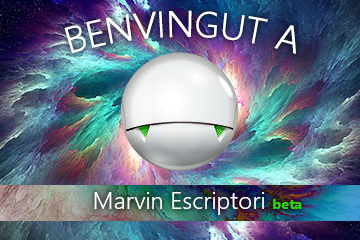
<style>
.page{position:relative;width:360px;height:240px}
.page>*{position:absolute;margin:0}
.t1{font:36px "SegoeUI-Semilight";color:#ffffff}
.t2{font:24px "SegoeUI-Semilight";color:#ffffff}
.t3{font:14px "SegoeUI-Bold";color:#2cd410}
</style>
<div class="page">
<p class="t1" style="left:64px;top:10px;width:232px;height:44px">BENVINGUT A</p>
<p class="t2" style="left:94px;top:192px;width:208px;height:23px">Marvin Escriptori <span class="t3">beta</span></p>
</div>
